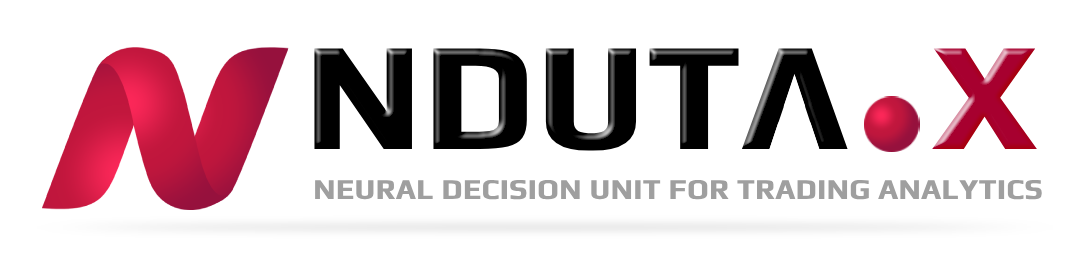
<style>
.page{position:relative;width:1086px;height:261px;background:#ffffff}
.page>*{position:absolute;margin:0}
.t1{font:29px "Play-Bold";letter-spacing:0.004em;color:#9f9f9f;text-transform:uppercase;font-weight:bold}
</style>
<div class="page">
<p class="t1" style="left:315px;top:179px;width:727px;height:21px">Neural Decision Unit for Trading Analytics</p>
</div>
